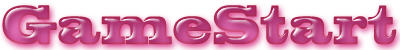
<style>
.page{position:relative;width:400px;height:50px}
.page>*{position:absolute;margin:0}
.t1{font:52.1px "BlackoakStd";scale:0.58 1}
</style>
<div class="page">
<p class="t1" style="left:2px;top:5px;width:395px;height:40px">GameStart</p>
</div>
